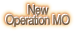
<style>
.page{position:relative;width:75px;height:31px;background:#ffffff}
.page>*{position:absolute;margin:0}
.t1{font:13px/10px "FutoGoB101Pr5-Bold";letter-spacing:-0.09em;font-weight:bold;scale:0.85 1}
.t2{font:13px/10px "FutoGoB101Pr5-Bold";letter-spacing:-0.09em;color:#877158;font-weight:bold;scale:0.85 1}
</style>
<div class="page">
<p class="t1" style="left:5px;top:4px;width:64px;height:22px;text-align:center">New<br>Operation MO</p>
<p class="t2" style="left:6px;top:5px;width:64px;height:22px;text-align:center">New<br>Operation MO</p>
</div>
